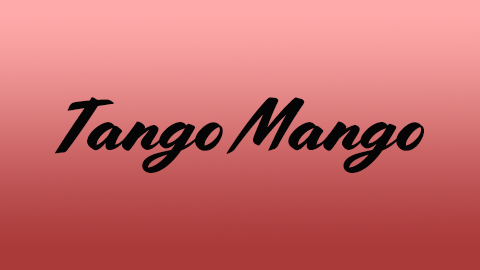
<style>
.page{position:relative;width:480px;height:270px}
.page>*{position:absolute;margin:0}
.t1{font:75px "Cortado";color:#050505}
</style>
<div class="page">
<p class="t1" style="left:55px;top:97px;width:369px;height:76px">Tango Mango</p>
</div>
